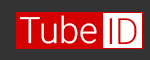
<style>
.page{position:relative;width:150px;height:60px;background:#333333}
.page>*{position:absolute;margin:0}
.t1{font:36.2px "Roboto-Light";color:#ffffff}
.t2{font:36.2px "Roboto-Light";color:#d50000}
</style>
<div class="page">
<p class="t1" style="left:19px;top:15px;width:78px;height:29px">Tube</p>
<p class="t2" style="left:109px;top:18px;width:28px;height:27px">ID</p>
</div>
